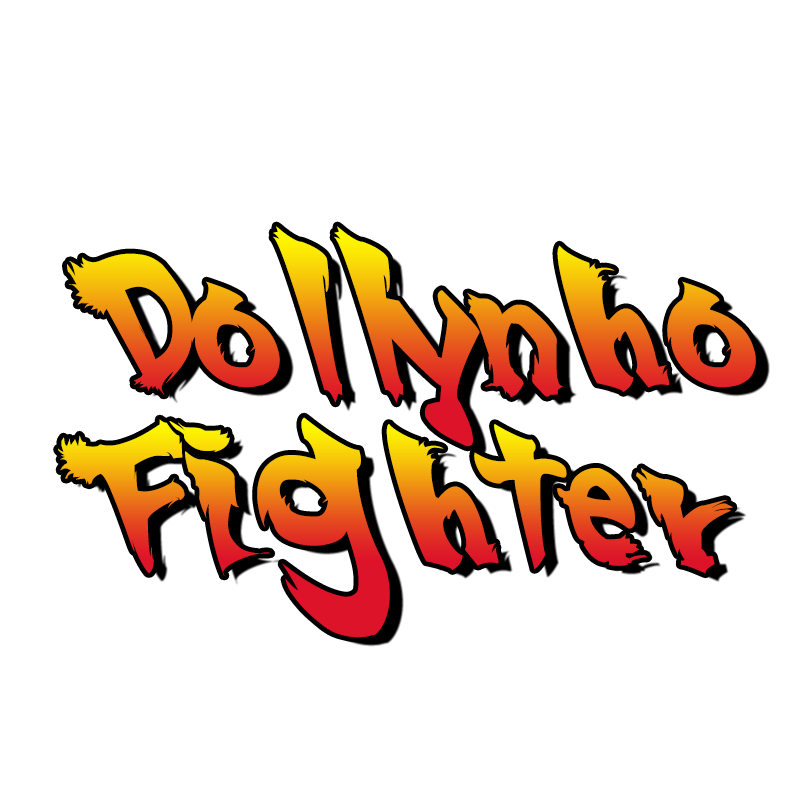
<style>
.page{position:relative;width:800px;height:800px;background:#ffffff}
.page>*{position:absolute;margin:0}
.t1{font:130px "SSF4-ABUKET-Regular"}
</style>
<div class="page">
<p class="t1" style="left:67px;top:226px;width:689px;height:221px">Dollynho</p>
<p class="t1" style="left:58px;top:417px;width:675px;height:221px">Fighter</p>
</div>
